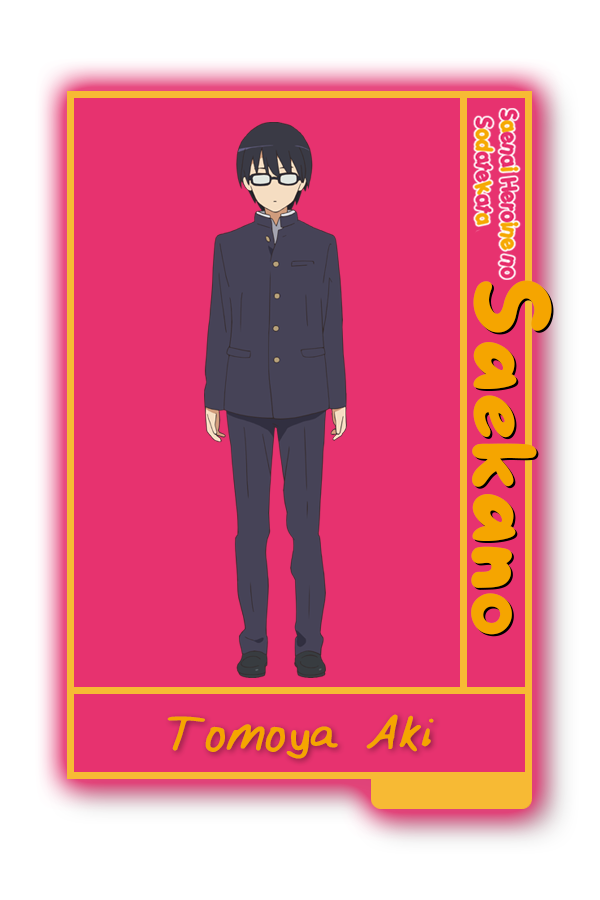
<style>
.page{position:relative;width:600px;height:900px;background:#e7326f}
.page>*{position:absolute;margin:0}
.t1{font:109.9px "Go-Mocha";color:#f5a500;scale:1.04 1}
.t2{font:56.9px "Girly_handwriting";color:#f5a500;scale:1.17 1}
</style>
<div class="page">
<p class="t1" style="left:471px;top:280px;width:81px;height:355px;rotate:91deg">Saekano</p>
<p class="t2" style="left:167px;top:714px;width:267px;height:45px">Tomoya Aki</p>
</div>
